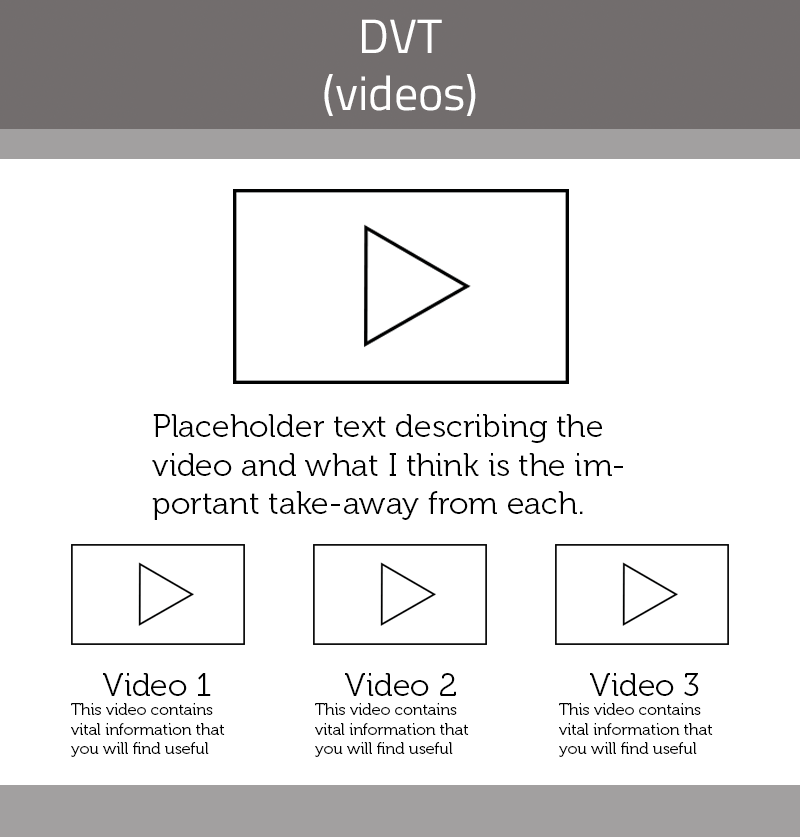
<style>
.page{position:relative;width:800px;height:837px;background:#ffffff}
.page>*{position:absolute;margin:0}
.t1{font:48px "TitilliumWeb-Regular";color:#ffffff}
.t2{font:32px "Museo-300";color:#000000}
.t3{font:16px "Museo-300";color:#000000}
</style>
<div class="page">
<p class="t1" style="left:324px;top:19px;width:152px;height:97px;text-align:center">DVT<br>(videos)</p>
<p class="t2" style="left:152px;top:414px;width:471px;height:106px">Placeholder text describing the video and what I think is the important take-away from each.</p>
<p class="t3" style="left:71px;top:673px;width:154px;height:84px;text-align:center"><span class="t2">Video 1<br></span>This video contains vital information that you will find useful</p>
<p class="t3" style="left:315px;top:673px;width:154px;height:84px;text-align:center"><span class="t2">Video 2<br></span>This video contains vital information that you will find useful</p>
<p class="t3" style="left:559px;top:673px;width:154px;height:84px;text-align:center"><span class="t2">Video 3<br></span>This video contains vital information that you will find useful</p>
</div>
